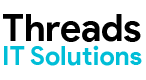
<style>
.page{position:relative;width:146px;height:80px;background:#ffffff}
.page>*{position:absolute;margin:0}
.t1{font:37.8px "ProductSans-Bold";color:#000000}
.t2{font:26.5px "ProductSans-Bold";color:#00bed7}
</style>
<div class="page">
<p class="t1" style="left:3px;top:14px;width:138px;height:28px">Threads</p>
<p class="t2" style="left:4px;top:45px;width:138px;height:21px">IT Solutions</p>
</div>
